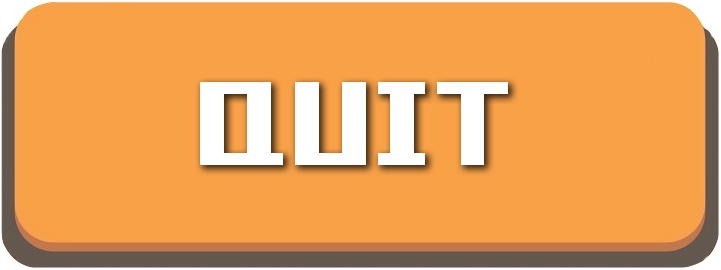
<style>
.page{position:relative;width:721px;height:270px;background:#f8a147}
.page>*{position:absolute;margin:0}
.t1{font:131.1px "Cyber11";color:#ffffff}
</style>
<div class="page">
<p class="t1" style="left:200px;top:82px;width:308px;height:83px">QUIT</p>
</div>
